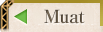
<style>
.page{position:relative;width:103px;height:32px}
.page>*{position:absolute;margin:0}
.t1{font:18px "RyuminPro-ExBold";letter-spacing:-0.04em;color:#665a4a}
</style>
<div class="page">
<p class="t1" style="left:44px;top:9px;width:41px;height:15px">Muat</p>
</div>
